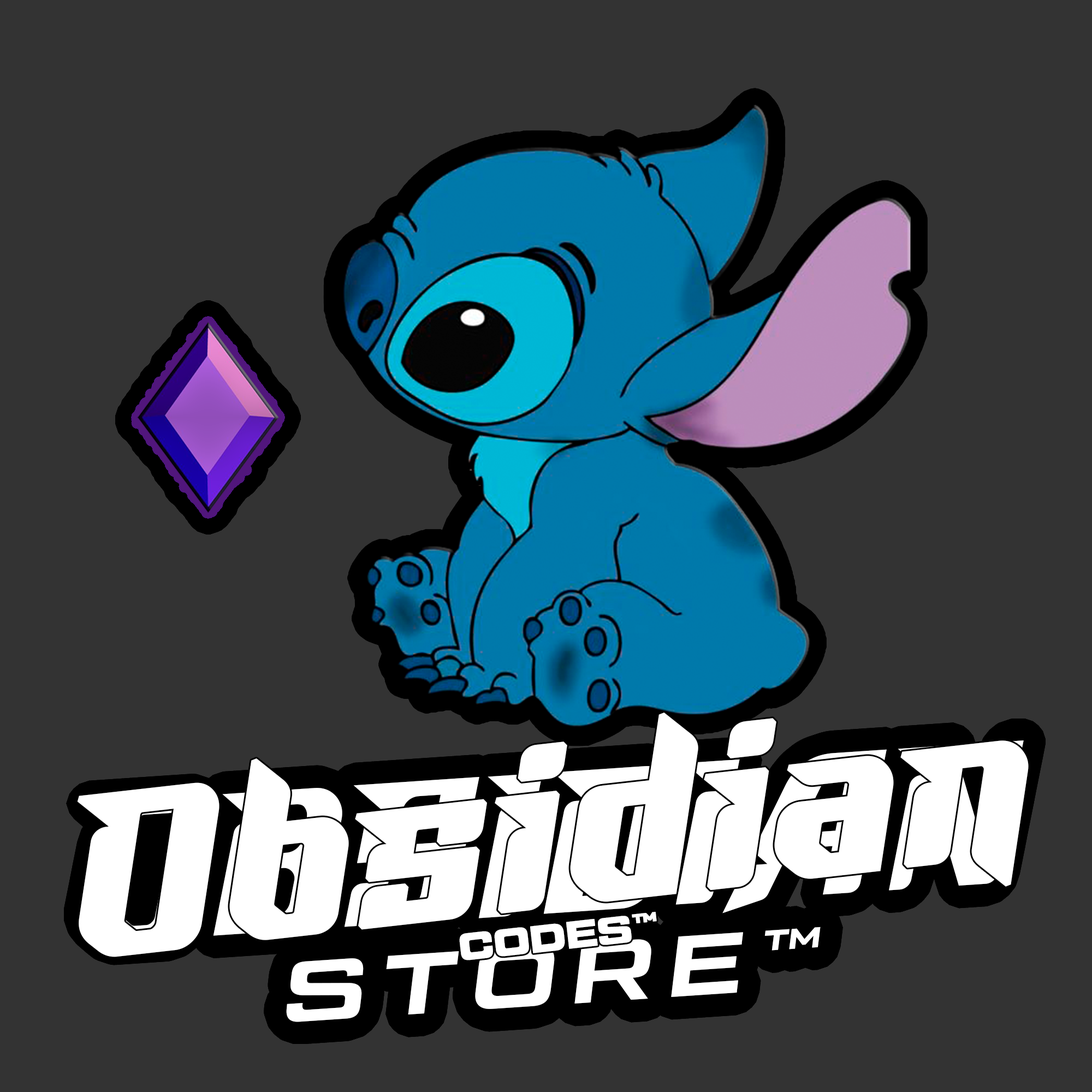
<style>
.page{position:relative;width:1092px;height:1092px;background:#333333}
.page>*{position:absolute;margin:0}
.t1{font:234.2px "FinoDemoVersion";color:#ffffff;font-weight:bold}
.t2{font:37.7px "TacticSansExd-Blk";color:#ffffff;font-weight:bold}
</style>
<div class="page">
<p class="t1" style="left:77px;top:713px;width:952px;height:247px;text-align:center;rotate:-6deg">Obsidian<br><span class="t2">CODES™</span></p>
</div>
